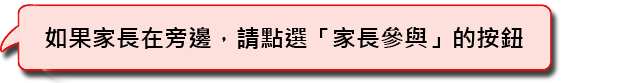
<style>
.page{position:relative;width:630px;height:83px;background:#fde0db}
.page>*{position:absolute;margin:0}
.t1{font:24px "MicrosoftJhengHeiBold";color:#000000}
</style>
<div class="page">
<p class="t1" style="left:45px;top:27px;width:478px;height:22px">如果家長在旁邊，請點選「家長參與」的按鈕</p>
</div>
